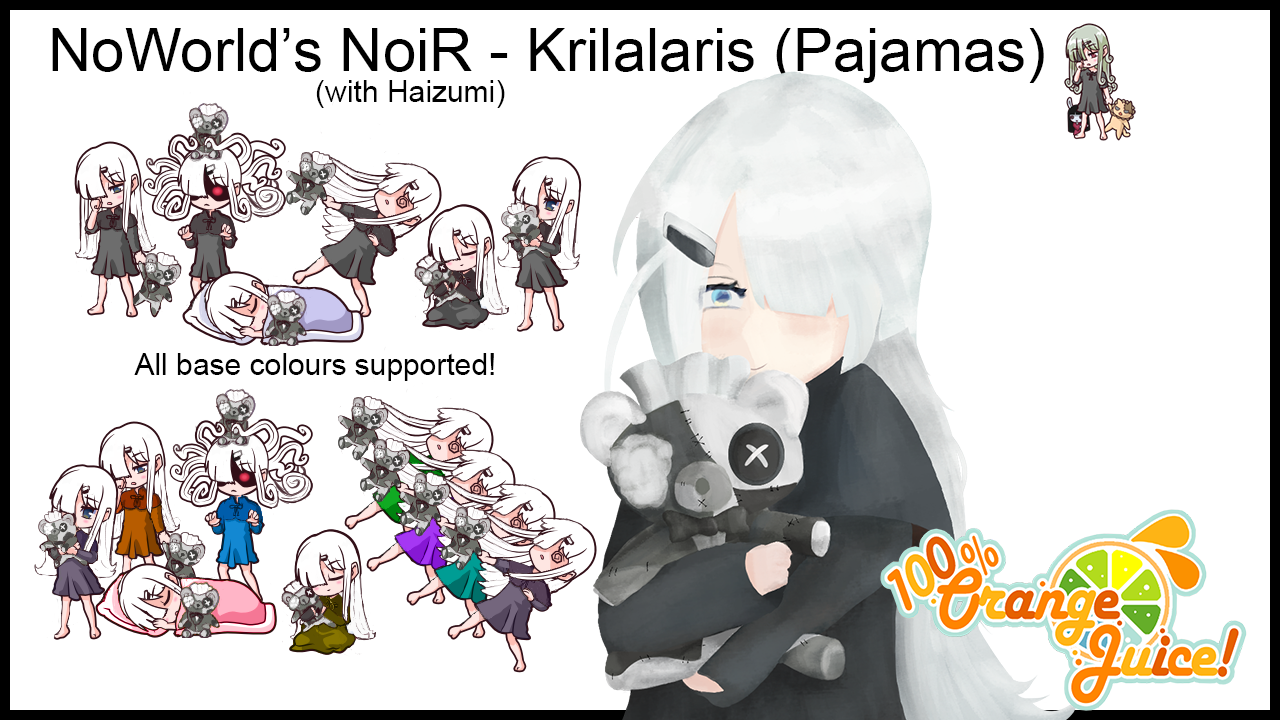
<style>
.page{position:relative;width:1280px;height:720px;background:#ffffff}
.page>*{position:absolute;margin:0}
.t1{font:60px "ArialMT";color:#000000}
.t2{font:30px "ArialMT";color:#000000}
</style>
<div class="page">
<p class="t1" style="left:52px;top:28px;width:992px;height:55px">NoWorld’s NoiR - Krilalaris (Pajamas)</p>
<p class="t2" style="left:316px;top:80px;width:189px;height:28px">(with Haizumi)</p>
<p class="t2" style="left:134px;top:353px;width:360px;height:28px">All base colours supported!</p>
</div>
